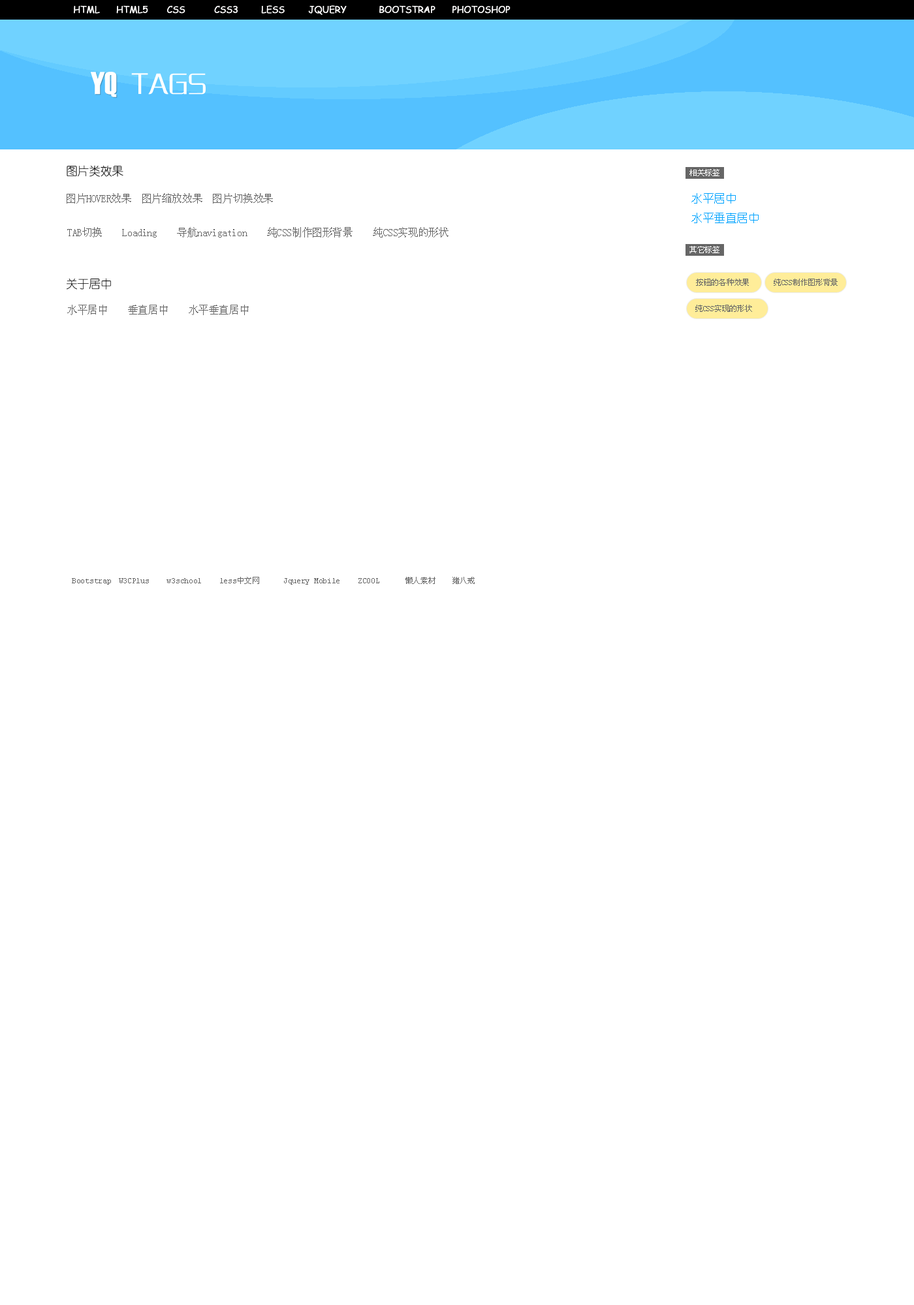
<style>
.page{position:relative;width:914px;height:1305px;background:#ffffff}
.page>*{position:absolute;margin:0}
.t1{font:9.1px "ComicSansMS";letter-spacing:-0.025em;color:#fffefe;font-weight:bold}
.t2{font:31.3px "Haettenschweiler";letter-spacing:-0.025em;color:#ffffff;font-weight:bold}
.t3{font:31.3px "GJJZQJW--GB1-0";letter-spacing:-0.025em;color:#ffffff;font-weight:bold}
.t4{font:11.7px "YouYuan";letter-spacing:-0.025em;color:#000000}
.t5{font:7.8px "SimSun";letter-spacing:-0.025em;color:#ffffff}
.t6{font:10.4px "SimSun";letter-spacing:-0.025em;color:#666666}
.t7{font:11.7px/19.6px "YouYuan";letter-spacing:-0.025em;color:#00a3ff}
.t8{font:7.8px "SimSun";letter-spacing:-0.025em;color:#666666}
.t9{font:7.8px "CourierNewPSMT";letter-spacing:-0.025em;color:#666666}
</style>
<div class="page">
<p class="t1" style="left:74px;top:5px;width:436px;height:10px">HTML      HTML5   CSS   CSS3    LESS   JQUERY     BOOTSTRAP   PHOTOSHOP</p>
<p class="t2" style="left:91px;top:72px;width:26px;height:25px">YQ</p>
<p class="t3" style="left:131px;top:73px;width:75px;height:22px">TAGS</p>
<p class="t4" style="left:67px;top:165px;width:56px;height:12px">图片类效果</p>
<p class="t5" style="left:689px;top:169px;width:30px;height:7px">相关标签</p>
<p class="t6" style="left:67px;top:193px;width:206px;height:11px">图片HOVER效果  图片缩放效果  图片切换效果</p>
<p class="t7" style="left:691px;top:193px;width:67px;height:30px">水平居中<br>水平垂直居中</p>
<p class="t6" style="left:67px;top:227px;width:381px;height:11px">TAB切换    Loading    导航navigation    纯CSS制作图形背景    纯CSS实现的形状</p>
<p class="t5" style="left:689px;top:246px;width:30px;height:7px">其它标签</p>
<p class="t4" style="left:67px;top:278px;width:44px;height:12px">关于居中</p>
<p class="t8" style="left:696px;top:279px;width:53px;height:7px">按钮的各种效果</p>
<p class="t8" style="left:773px;top:279px;width:64px;height:7px">纯CSS制作图形背景</p>
<p class="t6" style="left:67px;top:305px;width:182px;height:10px">水平居中    垂直居中    水平垂直居中</p>
<p class="t8" style="left:695px;top:305px;width:57px;height:7px">纯CSS实现的形状</p>
<p class="t9" style="left:72px;top:577px;width:402px;height:8px">Bootstrap  W3CPlus    w3school    less<span class="t8">中文网</span>  Jquery Mobile    ZCOOL   <span class="t8">懒人素材   猪八戒</span></p>
</div>
